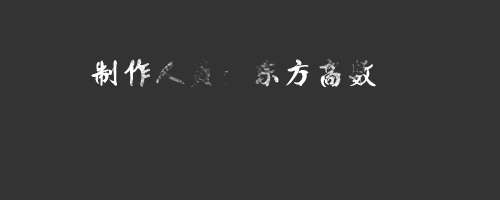
<style>
.page{position:relative;width:500px;height:200px;background:#333333}
.page>*{position:absolute;margin:0}
.t1{font:32px "HDZK--HSJHDTJ-01"}
</style>
<div class="page">
<p class="t1" style="left:91px;top:58px;width:285px;height:30px">制作人员：东方高数</p>
</div>
